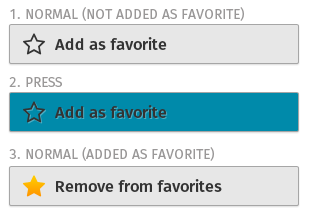
<style>
.page{position:relative;width:309px;height:216px;background:#ffffff}
.page>*{position:absolute;margin:0}
.t1{font:13.8px "Moz";color:#9a9898;text-transform:uppercase}
.t2{font:16px "MozMedium";color:#333333}
</style>
<div class="page">
<p class="t1" style="left:10px;top:7px;width:234px;height:14px">1. normal (Not added as favorite)</p>
<p class="t2" style="left:55px;top:37px;width:112px;height:13px">Add as favorite</p>
<p class="t1" style="left:9px;top:77px;width:53px;height:10px">2. press</p>
<p class="t2" style="left:55px;top:105px;width:112px;height:13px">Add as favorite</p>
<p class="t1" style="left:9px;top:147px;width:205px;height:14px">3. normal (Added as favorite)</p>
<p class="t2" style="left:56px;top:179px;width:166px;height:13px">Remove from favorites</p>
</div>
